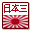
<style>
.page{position:relative;width:33px;height:32px;background:#ffffff}
.page>*{position:absolute;margin:0}
.t1{font:10.4px "SimSun";letter-spacing:-0.25em;color:#ae0012}
</style>
<div class="page">
<p class="t1" style="left:4px;top:4px;width:23px;height:9px">日本三</p>
</div>
